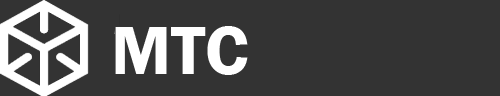
<style>
.page{position:relative;width:500px;height:96px;background:#333333}
.page>*{position:absolute;margin:0}
.t1{font:70px "FranklinGothic-Demi";color:#ffffff}
</style>
<div class="page">
<p class="t1" style="left:115px;top:26px;width:133px;height:49px">MTC</p>
</div>
